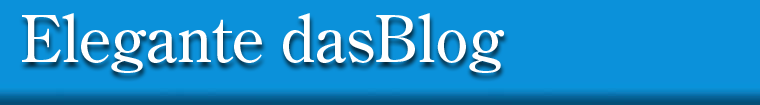
<style>
.page{position:relative;width:760px;height:105px;background:#0b91da}
.page>*{position:absolute;margin:0}
.t1{font:64px "CenturyOldStyleStd-Regular";color:#ffffff}
</style>
<div class="page">
<p class="t1" style="left:22px;top:13px;width:483px;height:60px">Elegante dasBlog</p>
</div>
